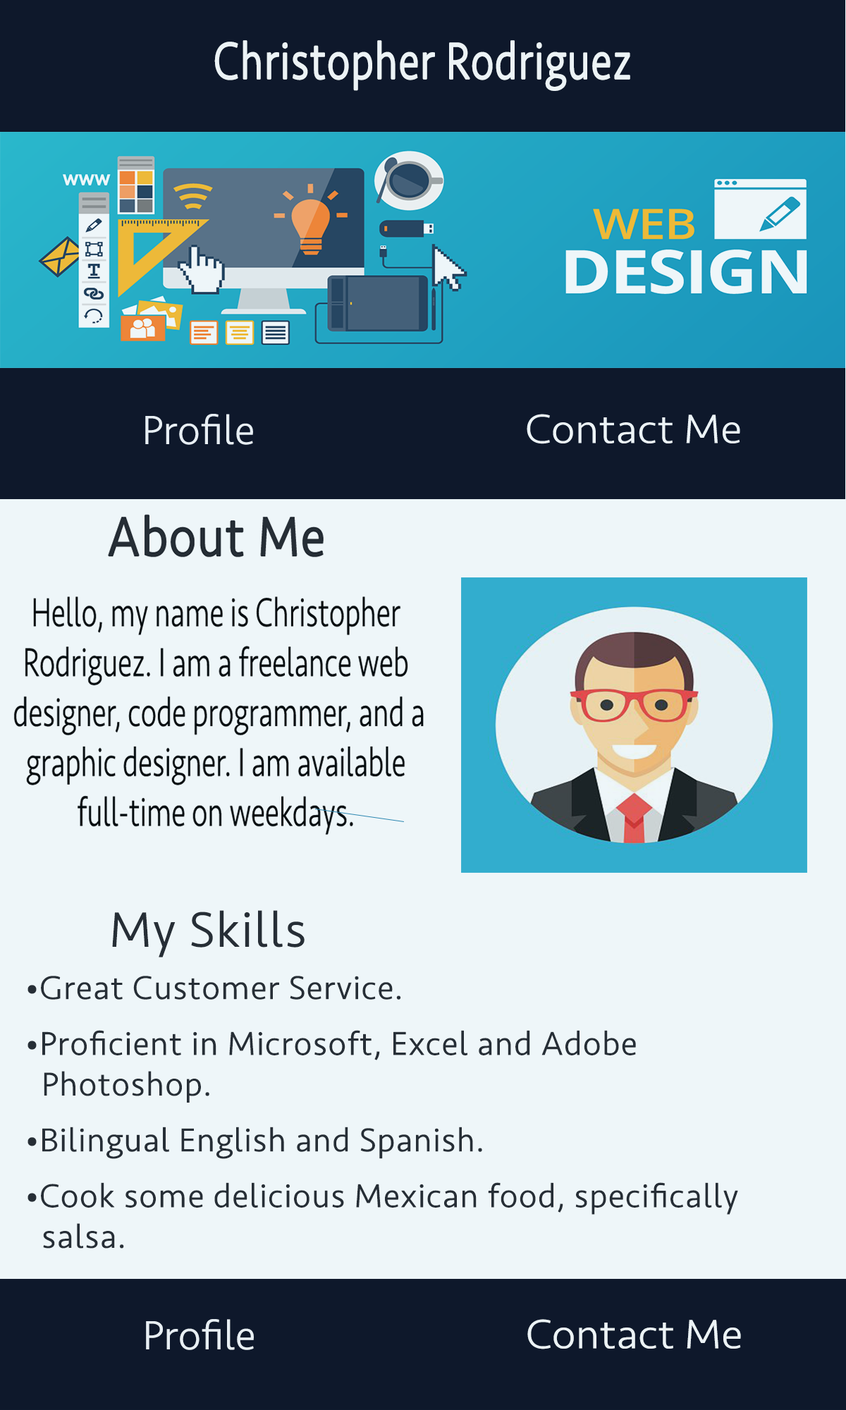
<style>
.page{position:relative;width:846px;height:1410px;background:#eef6f9}
.page>*{position:absolute;margin:0}
.t1{font:53.2px "Seravek-Light";color:#fcfcfc;font-weight:bold;scale:0.8 1}
.t2{font:33.8px "Seravek-Light";color:#25262b;font-weight:bold}
.t3{font:42.3px "Seravek-Light";color:#25262b;font-weight:bold}
.t4{font:50.8px "Seravek-Light";color:#25262b;font-weight:bold}
.t5{font:42.3px "Seravek-Light";color:#f8f8fa}
.t6{font:42.3px "Seravek-Light";color:#fcfcfc;scale:1.05 1}
</style>
<div class="page">
<p class="t1" style="left:214px;top:40px;width:416px;height:51px">Christopher Rodriguez</p>
<p class="t2" style="left:27px;top:910px;width:711px;height:338px"><span class="t3">       </span><span class="t4"> My Skills<br><br></span>•Great Customer Service.<br><br>•Proficient in Microsoft, Excel and Adobe <br>  Photoshop.<br><br>•Bilingual English and Spanish.<br><br>•Cook some delicious Mexican food, specifically <br>  salsa.</p>
<p class="t5" style="left:146px;top:1319px;width:108px;height:31px">Profile</p>
<p class="t6" style="left:527px;top:1319px;width:214px;height:30px">Contact Me</p>
</div>
